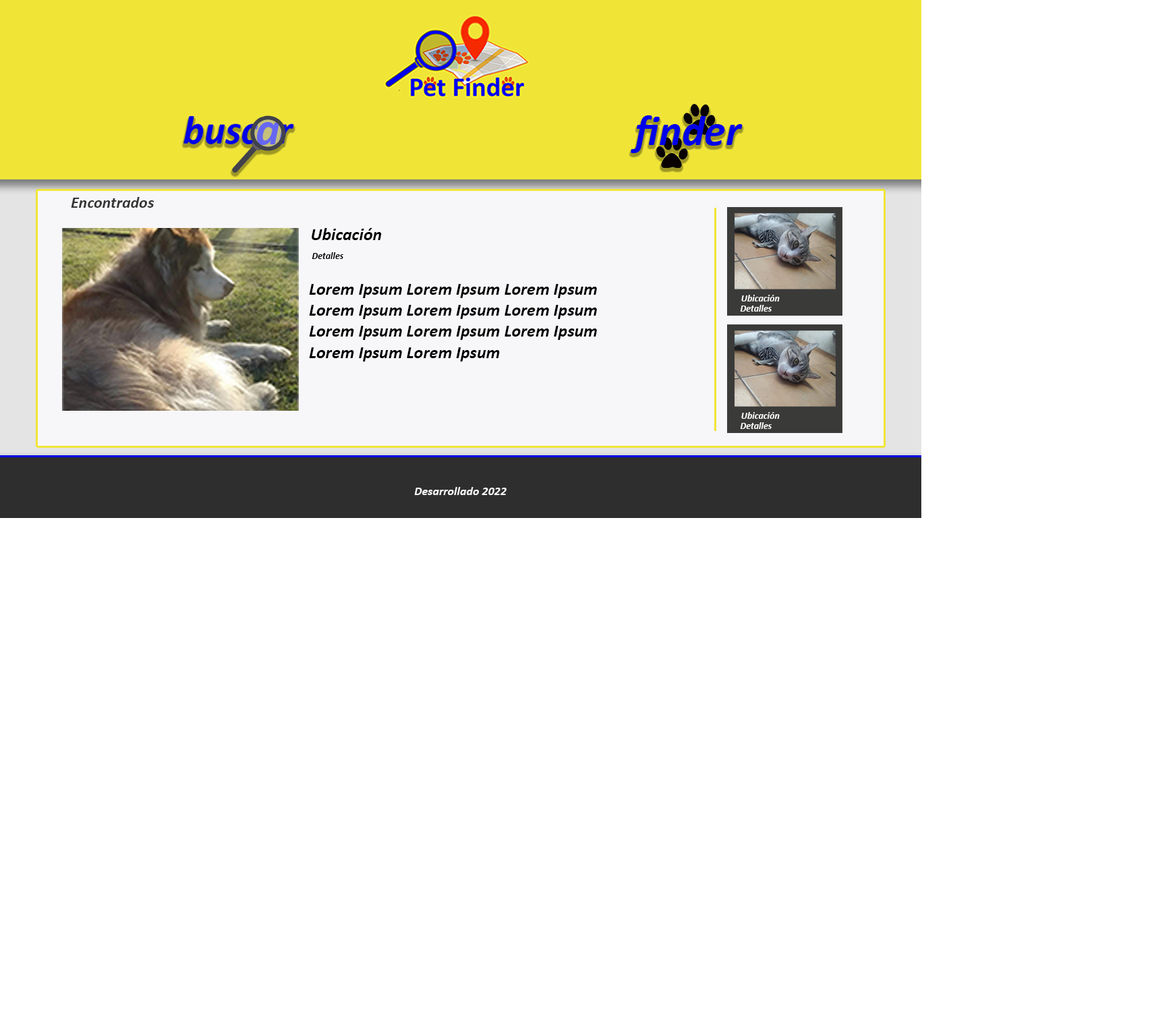
<style>
.page{position:relative;width:1152px;height:1036px;background:#ffffff}
.page>*{position:absolute;margin:0}
.t1{font:43.2px "Calibri-BoldItalic";color:#0002e8}
.t2{font:16.2px "Calibri-BoldItalic";color:#353535}
.t3{font:17.5px "Calibri-BoldItalic";color:#000000}
.t4{font:9.4px "Calibri-BoldItalic";color:#000000}
.t5{font:9.4px "Calibri-BoldItalic";color:#fcfcfc}
.t6{font:12.1px "Calibri-BoldItalic";color:#faf7f7}
</style>
<div class="page">
<p class="t1" style="left:630px;top:115px;width:112px;height:38px">finder</p>
<p class="t2" style="left:71px;top:197px;width:83px;height:11px">Encontrados</p>
<p class="t3" style="left:311px;top:228px;width:71px;height:12px">Ubicación</p>
<p class="t4" style="left:311px;top:252px;width:32px;height:7px">Detalles</p>
<p class="t3" style="left:309px;top:284px;width:288px;height:77px">Lorem Ipsum Lorem Ipsum Lorem Ipsum<br>Lorem Ipsum Lorem Ipsum Lorem Ipsum<br>Lorem Ipsum Lorem Ipsum Lorem Ipsum<br>Lorem Ipsum Lorem Ipsum</p>
<p class="t5" style="left:740px;top:305px;width:31px;height:6px">Detalles</p>
<p class="t5" style="left:741px;top:295px;width:38px;height:6px">Ubicación</p>
<p class="t5" style="left:741px;top:412px;width:38px;height:7px">Ubicación</p>
<p class="t5" style="left:740px;top:422px;width:31px;height:7px">Detalles</p>
<p class="t6" style="left:414px;top:487px;width:92px;height:8px">Desarrollado 2022</p>
</div>
